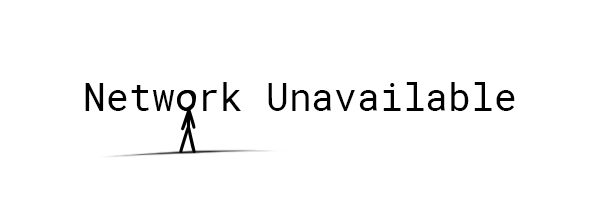
<style>
.page{position:relative;width:600px;height:200px;background:#ffffff}
.page>*{position:absolute;margin:0}
.t1{font:38px "RobotoMono-Regular";color:#000000}
</style>
<div class="page">
<p class="t1" style="left:85px;top:82px;width:430px;height:29px">Network Unavailable</p>
</div>
